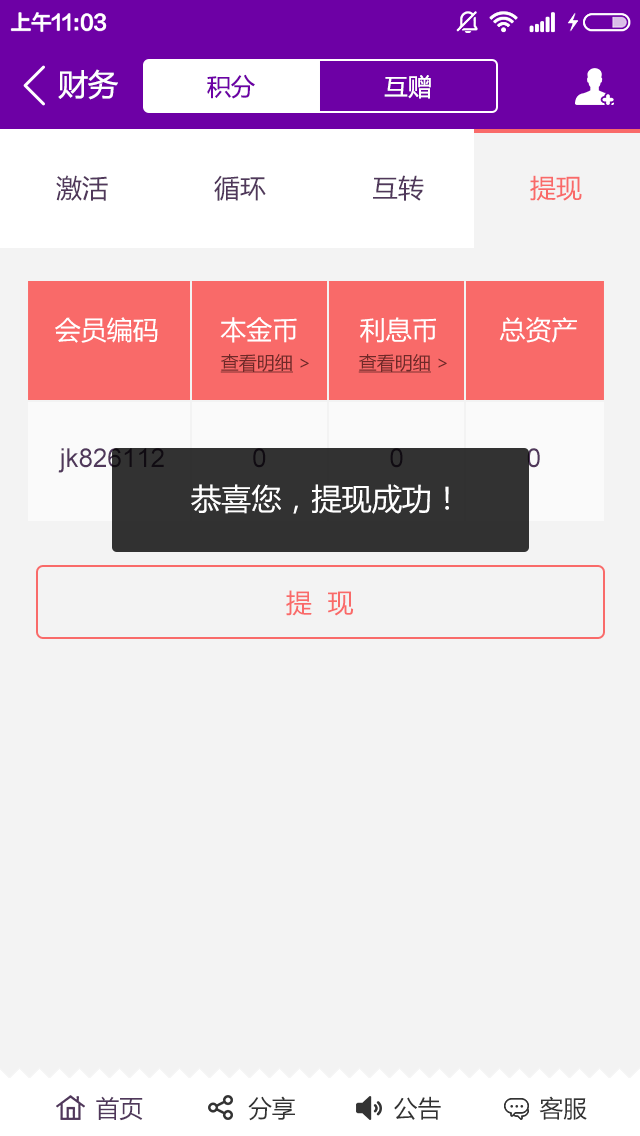
<style>
.page{position:relative;width:640px;height:1136px;background:#f3f3f3}
.page>*{position:absolute;margin:0}
.t1{font:30px "MicrosoftYaHei";color:#ffffff}
.t2{font:24px "MicrosoftYaHei";color:#6d00a5}
.t3{font:24px "MicrosoftYaHei";color:#ffffff}
.t4{font:26px "MicrosoftYaHei";color:#50385b}
.t5{font:26px "MicrosoftYaHei";color:#f96a69}
.t6{font:26px "MicrosoftYaHei";color:#ffffff}
.t7{font:18px "MicrosoftYaHei";color:#6f2928;text-decoration:underline}
.t8{font:18px "MicrosoftYaHei";color:#6f2928}
.t9{font:24px "MicrosoftYaHei";color:#333333}
.t10{font:24px "MicrosoftYaHei";color:#50385b}
</style>
<div class="page">
<p class="t1" style="left:58px;top:69px;width:60px;height:31px">财务</p>
<p class="t2" style="left:207px;top:74px;width:48px;height:25px">积分</p>
<p class="t3" style="left:384px;top:75px;width:47px;height:24px">互赠</p>
<p class="t4" style="left:56px;top:175px;width:52px;height:26px">激活</p>
<p class="t4" style="left:214px;top:175px;width:52px;height:26px">循环</p>
<p class="t4" style="left:373px;top:175px;width:51px;height:26px">互转</p>
<p class="t5" style="left:530px;top:175px;width:52px;height:26px">提现</p>
<p class="t6" style="left:55px;top:317px;width:522px;height:26px">会员编码        本金币        利息币        总资产</p>
<p class="t7" style="left:220px;top:354px;width:89px;height:19px">查看明细<span class="t8"> &gt;</span></p>
<p class="t7" style="left:358px;top:354px;width:89px;height:19px">查看明细<span class="t8"> &gt;</span></p>
<p class="t1" style="left:191px;top:484px;width:258px;height:30px">恭喜您，提现成功！</p>
<p class="t5" style="left:286px;top:590px;width:68px;height:26px">提  现</p>
<p class="t9" style="left:96px;top:1096px;width:491px;height:25px"><span class="t10">首页</span>               分享              公告              客服</p>
</div>
